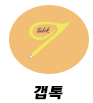
<style>
.page{position:relative;width:93px;height:103px;background:#ffffff}
.page>*{position:absolute;margin:0}
.t1{font:14.9px "KoreanSPD-R";letter-spacing:0.025em;color:#000000;scale:1.04 1}
</style>
<div class="page">
<p class="t1" style="left:33px;top:86px;width:31px;height:14px">갭톡</p>
</div>
